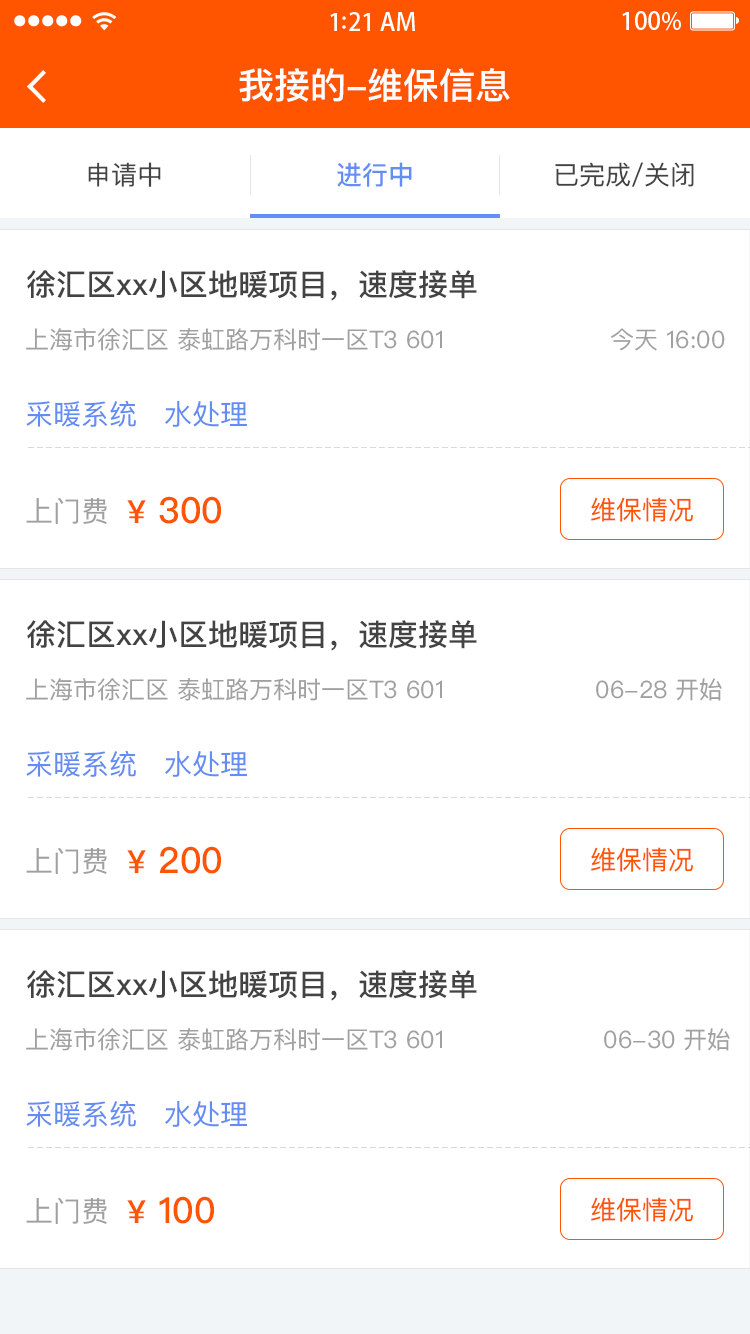
<style>
.page{position:relative;width:750px;height:1334px;background:#ffffff}
.page>*{position:absolute;margin:0}
.t1{font:36px "PingFangSC-Medium";color:#ffffff}
.t2{font:26px "PingFangSC-Regular";color:#434343}
.t3{font:26px "PingFangSC-Medium";color:#648df6}
.t4{font:30px "PingFangSC-Medium";color:#434343}
.t5{font:24px "PingFangSC-Regular";color:#a0a0a0}
.t6{font:28px "PingFangSC-Regular";color:#648df4}
.t7{font:28px "PingFangSC-Regular";color:#a0a0a0}
.t8{font:36px "PingFangSC-Medium";color:#ff5400}
.t9{font:32px "PingFangSC-Medium";color:#ff5400}
.t10{font:26px "PingFangSC-Regular";color:#ff5400}
</style>
<div class="page">
<p class="t1" style="left:239px;top:68px;width:271px;height:34px">我接的-维保信息</p>
<p class="t2" style="left:88px;top:162px;width:73px;height:25px">申请中</p>
<p class="t3" style="left:337px;top:162px;width:75px;height:25px">进行中</p>
<p class="t2" style="left:555px;top:162px;width:139px;height:25px">已完成/关闭</p>
<p class="t4" style="left:27px;top:270px;width:450px;height:31px">徐汇区xx小区地暖项目，速度接单</p>
<p class="t5" style="left:26px;top:328px;width:416px;height:23px">上海市徐汇区 泰虹路万科时一区T3 601</p>
<p class="t5" style="left:611px;top:328px;width:114px;height:23px">今天 16:00</p>
<p class="t6" style="left:26px;top:400px;width:110px;height:27px">采暖系统</p>
<p class="t6" style="left:165px;top:400px;width:82px;height:27px">水处理</p>
<p class="t7" style="left:26px;top:497px;width:81px;height:27px">上门费</p>
<p class="t8" style="left:127px;top:496px;width:94px;height:28px"><span class="t9">¥</span> 300</p>
<p class="t10" style="left:591px;top:497px;width:102px;height:25px">维保情况</p>
<p class="t4" style="left:27px;top:620px;width:450px;height:31px">徐汇区xx小区地暖项目，速度接单</p>
<p class="t5" style="left:26px;top:678px;width:416px;height:23px">上海市徐汇区 泰虹路万科时一区T3 601</p>
<p class="t5" style="left:596px;top:678px;width:126px;height:23px">06-28 开始</p>
<p class="t6" style="left:26px;top:750px;width:110px;height:27px">采暖系统</p>
<p class="t6" style="left:165px;top:750px;width:82px;height:27px">水处理</p>
<p class="t8" style="left:127px;top:846px;width:94px;height:28px"><span class="t9">¥</span> 200</p>
<p class="t7" style="left:26px;top:847px;width:81px;height:27px">上门费</p>
<p class="t10" style="left:591px;top:847px;width:102px;height:25px">维保情况</p>
<p class="t4" style="left:27px;top:970px;width:450px;height:31px">徐汇区xx小区地暖项目，速度接单</p>
<p class="t5" style="left:26px;top:1028px;width:416px;height:23px">上海市徐汇区 泰虹路万科时一区T3 601</p>
<p class="t5" style="left:604px;top:1028px;width:126px;height:23px">06-30 开始</p>
<p class="t6" style="left:26px;top:1100px;width:110px;height:27px">采暖系统</p>
<p class="t6" style="left:165px;top:1100px;width:82px;height:27px">水处理</p>
<p class="t7" style="left:26px;top:1197px;width:81px;height:27px">上门费</p>
<p class="t8" style="left:127px;top:1196px;width:87px;height:28px"><span class="t9">¥</span> 100</p>
<p class="t10" style="left:591px;top:1197px;width:102px;height:25px">维保情况</p>
</div>
